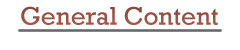
<style>
.page{position:relative;width:240px;height:50px;background:#ffffff}
.page>*{position:absolute;margin:0}
.t1{font:26px "Rockwell";color:#a65746}
</style>
<div class="page">
<p class="t1" style="left:21px;top:6px;width:197px;height:19px">General Content</p>
</div>
